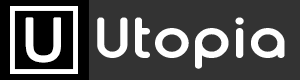
<style>
.page{position:relative;width:300px;height:80px;background:#333333}
.page>*{position:absolute;margin:0}
.t1{font:59.2px "ArialMT";letter-spacing:0.025em;color:#ffffff;font-weight:bold}
.t2{font:53.3px "TypoRoundBoldDemo";letter-spacing:0.025em;color:#ffffff;scale:1.12 1}
</style>
<div class="page">
<p class="t1" style="left:25px;top:17px;width:36px;height:46px">U</p>
<p class="t2" style="left:97px;top:17px;width:188px;height:52px">Utopia</p>
</div>
